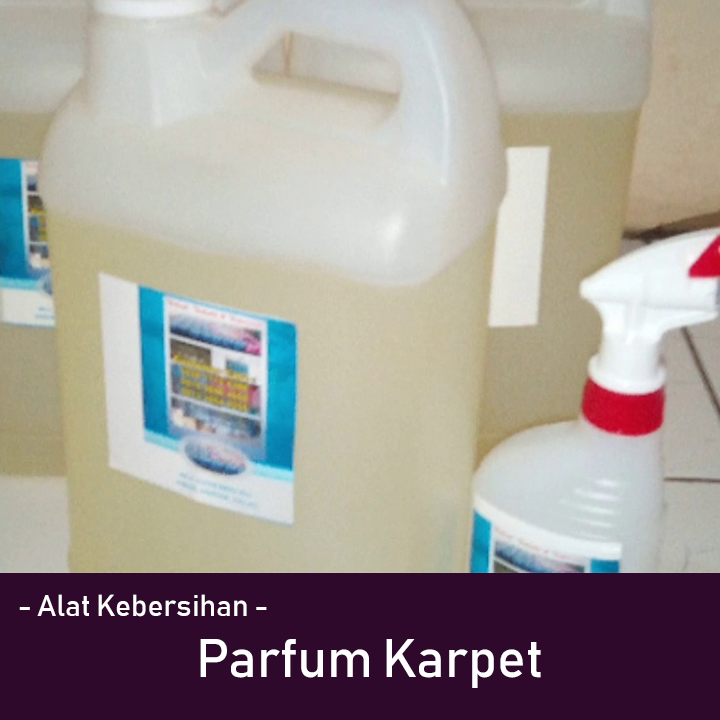
<style>
.page{position:relative;width:720px;height:720px}
.page>*{position:absolute;margin:0}
.t1{font:30px "Bahnschrift";color:#ffffff}
.t2{font:53.6px "Bahnschrift";color:#ffffff}
</style>
<div class="page">
<p class="t1" style="left:19px;top:594px;width:248px;height:23px">- Alat Kebersihan -</p>
<p class="t2" style="left:200px;top:639px;width:341px;height:49px">Parfum Karpet</p>
</div>
